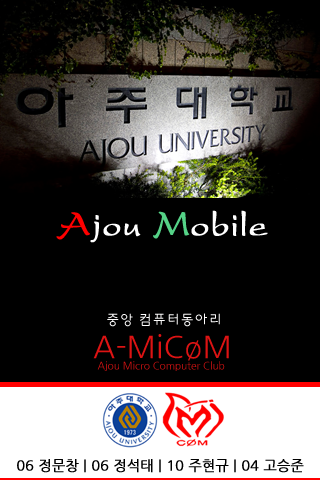
<style>
.page{position:relative;width:320px;height:480px;background:#000000}
.page>*{position:absolute;margin:0}
.t1{font:36px "³­ÃÊÃ¼";color:#ffffff;font-weight:bold}
.t2{font:36px "³­ÃÊÃ¼";color:#fe0000;font-weight:bold}
.t3{font:36px "³­ÃÊÃ¼";color:#55d287;font-weight:bold}
.t4{font:14px "HYkanM";color:#fffefe}
.t5{font:30.5px "NanumGothic";color:#dd1313}
.t6{font:10.2px "NanumGothic"}
.t7{font:14px "NanumGothic";color:#000000;font-weight:bold}
</style>
<div class="page">
<p class="t1" style="left:56px;top:210px;width:212px;height:33px"><span class="t2">A</span>jou <span class="t3">M</span>obile</p>
<p class="t4" style="left:107px;top:313px;width:113px;height:14px">중앙 컴퓨터동아리</p>
<p class="t5" style="left:93px;top:334px;width:136px;height:27px">A-MiCøM</p>
<p class="t6" style="left:97px;top:361px;width:128px;height:10px">Ajou Micro Computer Club</p>
<p class="t7" style="left:17px;top:459px;width:287px;height:14px">06 정문창 | 06 정석태 | 10 주현규 | 04 고승준</p>
</div>
